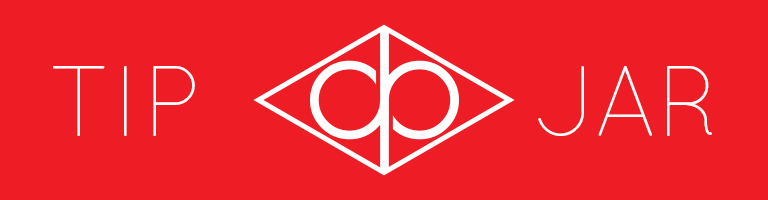
<style>
.page{position:relative;width:768px;height:200px;background:#ee1c24}
.page>*{position:absolute;margin:0}
.t1{font:100px "Quicksand-Light";color:#ffffff;text-transform:uppercase}
</style>
<div class="page">
<p class="t1" style="left:53px;top:66px;width:142px;height:70px">Tip</p>
<p class="t1" style="left:538px;top:66px;width:174px;height:70px">Jar</p>
</div>
